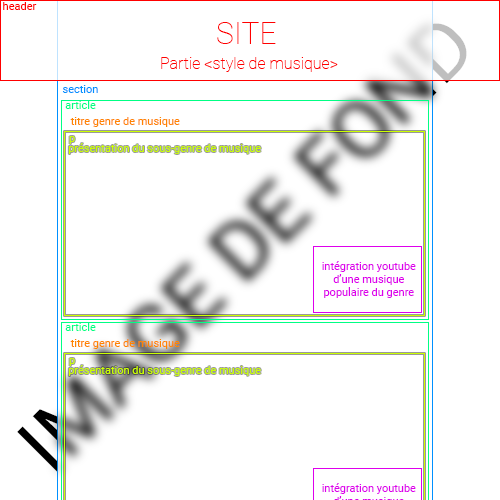
<style>
.page{position:relative;width:500px;height:500px;background:#ffffff}
.page>*{position:absolute;margin:0}
.t1{font:11px "Roboto-Regular";color:#ff0000}
.t2{font:79.5px "Roboto-Regular";scale:1.03 1}
.t3{font:30.2px "Roboto-Thin";color:#ff0000}
.t4{font:16px "Roboto-Thin";color:#ff0000}
.t5{font:11px "Roboto-Regular";color:#0090ff}
.t6{font:11px "Roboto-Regular";color:#00ff84}
.t7{font:11px "Roboto-Regular";color:#ff8400}
.t8{font:11px "Roboto-Regular";color:#ccff00}
.t9{font:11px "Roboto-Regular";color:#de00ec}
</style>
<div class="page">
<p class="t1" style="left:3px;top:2px;width:34px;height:8px">header</p>
<p class="t2" style="left:17px;top:23px;width:450px;height:449px;rotate:-45deg">IMAGE DE FOND</p>
<p class="t3" style="left:217px;top:22px;width:59px;height:22px">SITE</p>
<p class="t4" style="left:161px;top:57px;width:177px;height:15px">Partie &lt;style de musique&gt;</p>
<p class="t5" style="left:62px;top:85px;width:36px;height:8px">section</p>
<p class="t6" style="left:65px;top:100px;width:31px;height:9px">article</p>
<p class="t7" style="left:70px;top:117px;width:110px;height:10px">titre genre de musique</p>
<p class="t8" style="left:69px;top:136px;width:6px;height:8px">p</p>
<p class="t8" style="left:68px;top:143px;width:193px;height:11px">présentation du sous-genre de musique</p>
<p class="t9" style="left:322px;top:261px;width:94px;height:37px;text-align:center">intégration youtube<br>d’une musique<br>populaire du genre</p>
<p class="t6" style="left:65px;top:322px;width:31px;height:9px">article</p>
<p class="t7" style="left:70px;top:339px;width:110px;height:10px">titre genre de musique</p>
<p class="t8" style="left:68px;top:365px;width:193px;height:11px">présentation du sous-genre de musique</p>
<p class="t8" style="left:69px;top:358px;width:6px;height:8px">p</p>
</div>
